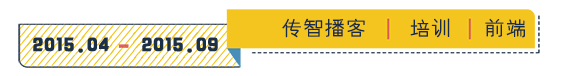
<style>
.page{position:relative;width:564px;height:76px;background:#ffffff}
.page>*{position:absolute;margin:0}
.t1{font:20px "FZYXJW--GB1-0";letter-spacing:0.05em;color:#172c48;font-weight:bold}
.t2{font:20px "JLinXin";letter-spacing:0.05em;color:#1b2f47;font-weight:bold}
</style>
<div class="page">
<p class="t1" style="left:282px;top:18px;width:243px;height:20px">传智播客    培训   前端</p>
<p class="t2" style="left:33px;top:37px;width:185px;height:16px">2015.04 2015.09</p>
</div>
